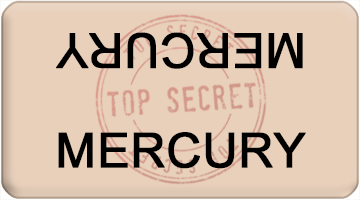
<style>
.page{position:relative;width:360px;height:200px;background:#e8d0bb}
.page>*{position:absolute;margin:0}
.t1{font:48px "ArialMT";color:#000000;font-weight:bold}
</style>
<div class="page">
<p class="t1" style="left:56px;top:32px;width:247px;height:37px;rotate:180deg">MERCURY</p>
<p class="t1" style="left:58px;top:132px;width:248px;height:37px">MERCURY</p>
</div>
